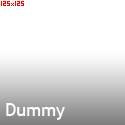
<style>
.page{position:relative;width:125px;height:125px;background:#ffffff}
.page>*{position:absolute;margin:0}
.t1{font:18px "TrebuchetMS";color:#ffffff}
</style>
<div class="page">
<p class="t1" style="left:6px;top:103px;width:59px;height:17px">Dummy</p>
</div>
